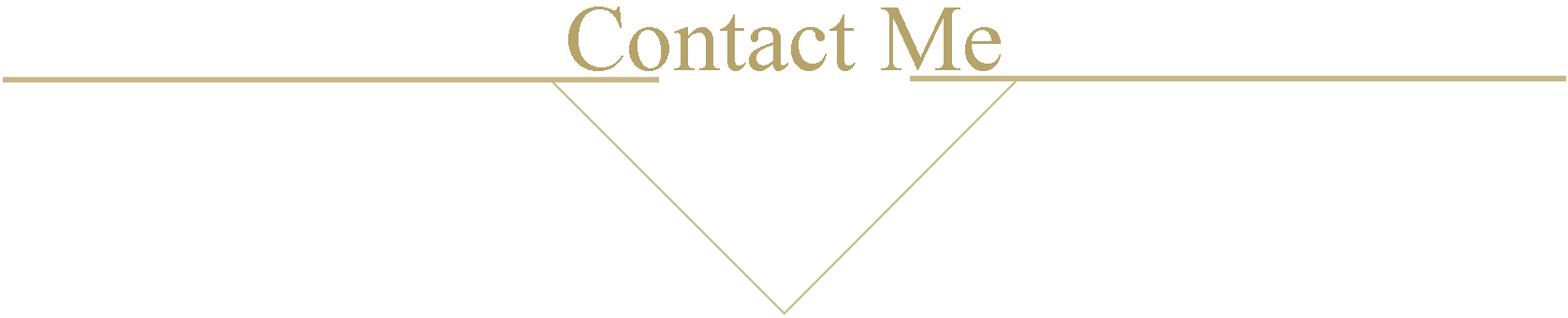
<style>
.page{position:relative;width:1568px;height:318px;background:#ffffff}
.page>*{position:absolute;margin:0}
.t1{font:93.6px "TimesNewRomanPSMT";color:#b5a36a}
</style>
<div class="page">
<p class="t1" style="left:568px;top:7px;width:433px;height:64px">Contact Me</p>
</div>
